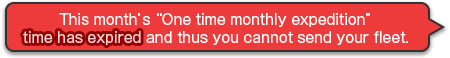
<style>
.page{position:relative;width:450px;height:58px;background:#ed3b3b}
.page>*{position:absolute;margin:0}
.t1{font:14px/18px "GothicMB101Pro-Regular";color:#ffffff}
.t2{font:14px/18px "GothicMB101Pro-Regular";color:#ffd3d3}
</style>
<div class="page">
<p class="t1" style="left:23px;top:13px;width:385px;height:32px;text-align:center">This month’s “One time monthly expedition”<br><span class="t2">time has expired </span>and thus you cannot send your fleet.</p>
<p class="t1" style="left:23px;top:13px;width:385px;height:32px;text-align:center">This month’s “One time monthly expedition”<br><span class="t2">time has expired </span>and thus you cannot send your fleet.</p>
</div>
